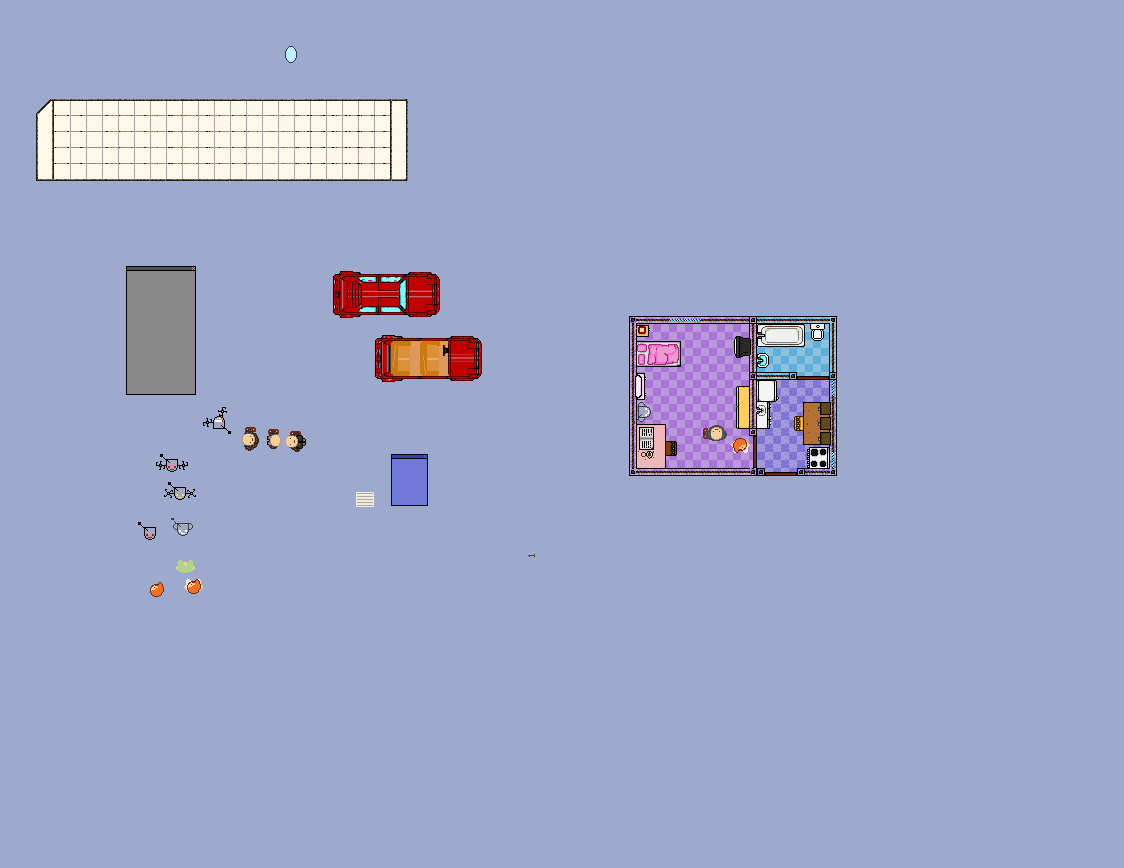
<style>
.page{position:relative;width:1124px;height:868px;background:#9da9cd}
.page>*{position:absolute;margin:0}
.t1{font:10.1px "Tahoma";color:#564238}
</style>
<div class="page">
<p class="t1" style="left:528px;top:554px;width:7px;height:3px;rotate:-90deg">1</p>
</div>
